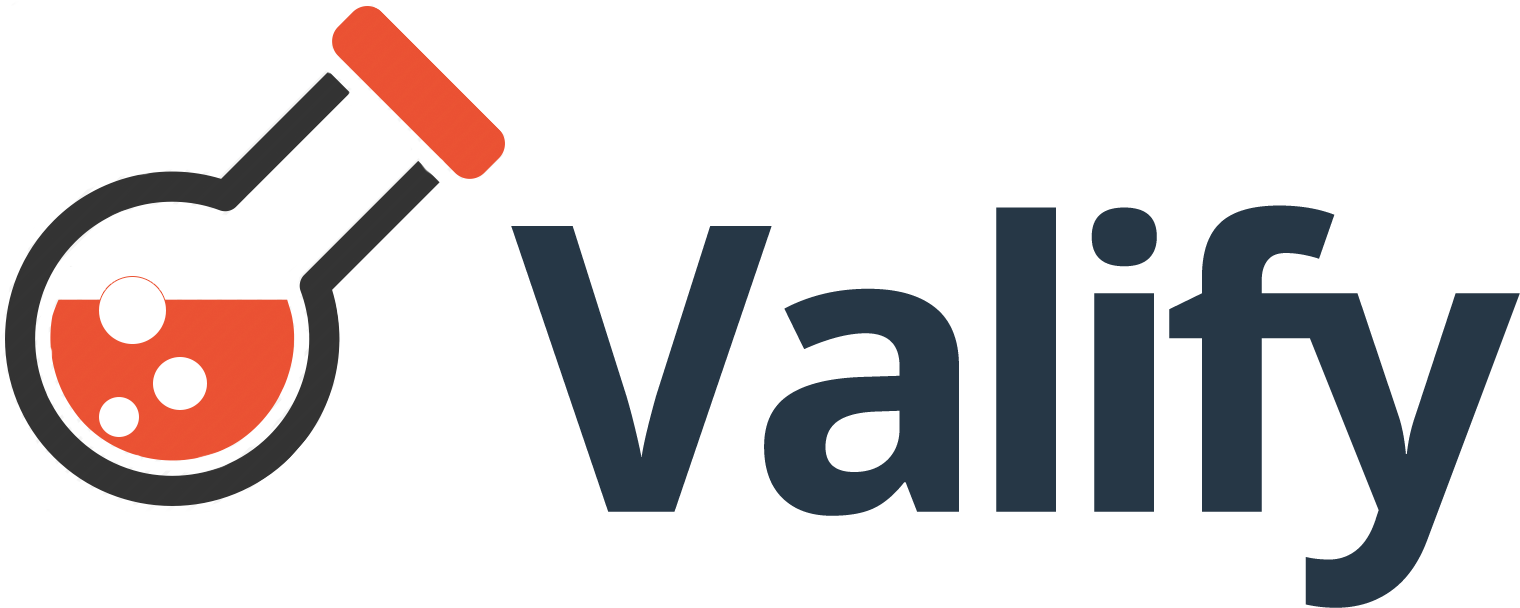
<style>
.page{position:relative;width:1520px;height:608px;background:#ffffff}
.page>*{position:absolute;margin:0}
.t1{font:400.1px "OpenSans-Bold";letter-spacing:-0.06em;color:#263746}
</style>
<div class="page">
<p class="t1" style="left:511px;top:205px;width:1009px;height:403px">Valify</p>
</div>
